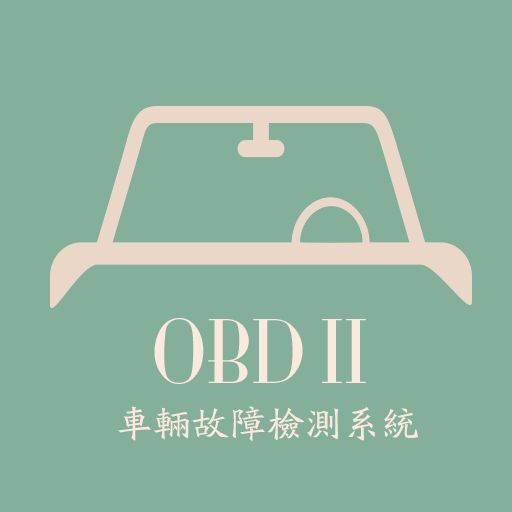
<style>
.page{position:relative;width:512px;height:512px;background:#83af9b}
.page>*{position:absolute;margin:0}
.t1{font:81px "MonaLisaSolidITCTT";color:#fbe9dc}
.t2{font:38px "FZBWKSFW--GB1-0";color:#fbe9dc}
</style>
<div class="page">
<p class="t1" style="left:154px;top:318px;width:212px;height:66px">OBD II</p>
<p class="t2" style="left:118px;top:406px;width:300px;height:36px">车辆故障检测系统</p>
</div>
